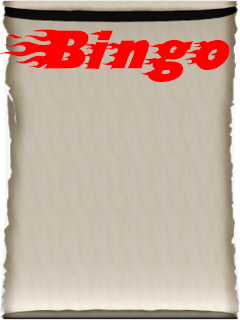
<style>
.page{position:relative;width:240px;height:320px}
.page>*{position:absolute;margin:0}
.t1{font:53.4px "Blazed";color:#ff0000}
</style>
<div class="page">
<p class="t1" style="left:0px;top:29px;width:230px;height:53px">Bingo</p>
</div>
